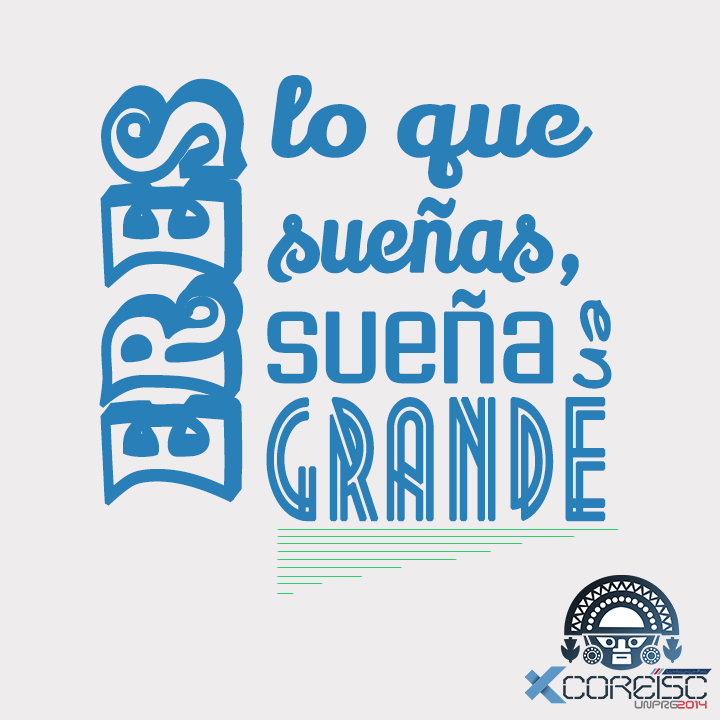
<style>
.page{position:relative;width:720px;height:720px;background:#eeecec}
.page>*{position:absolute;margin:0}
.t1{font:169.5px "ActionIs,ShadedJL";color:#2980b9;font-weight:bold;scale:1.28 1}
.t2{font:104px "LilyScriptOne-Regular";color:#2980b9;font-weight:bold;scale:1.09 1}
.t3{font:104px "LilyScriptOne-Regular";color:#2980b9;font-weight:bold;scale:0.83 1}
.t4{font:103.8px "AsseenonTV";color:#2980b9;font-weight:bold;scale:0.84 1}
.t5{font:70.3px "DomesticManners";color:#2980b9;font-weight:bold;scale:1.19 1}
.t6{font:150px "Metropolis1920";color:#2980b9;font-weight:bold;scale:0.78 1}
</style>
<div class="page">
<p class="t1" style="left:99px;top:78px;width:149px;height:428px;rotate:-90deg">Eres</p>
<p class="t2" style="left:271px;top:75px;width:322px;height:114px">lo que</p>
<p class="t3" style="left:267px;top:197px;width:312px;height:89px">sueñas,</p>
<p class="t4" style="left:267px;top:289px;width:287px;height:95px">sueña</p>
<p class="t5" style="left:572px;top:299px;width:40px;height:90px;rotate:90deg">en</p>
<p class="t6" style="left:266px;top:397px;width:340px;height:125px">GRANDE</p>
</div>
